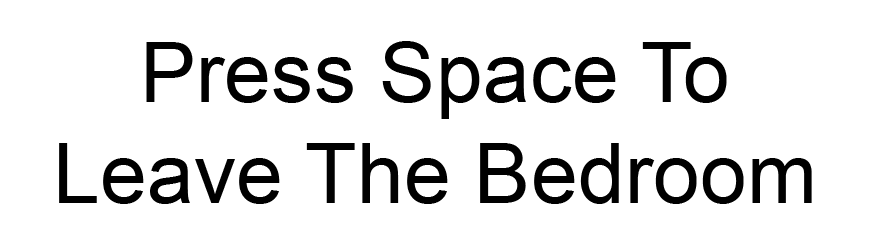
<style>
.page{position:relative;width:875px;height:250px;background:#ffffff}
.page>*{position:absolute;margin:0}
.t1{font:84.5px "ArialMT";color:#000000}
</style>
<div class="page">
<p class="t1" style="left:59px;top:41px;width:753px;height:163px;text-align:center">Press Space To Leave The Bedroom</p>
</div>
